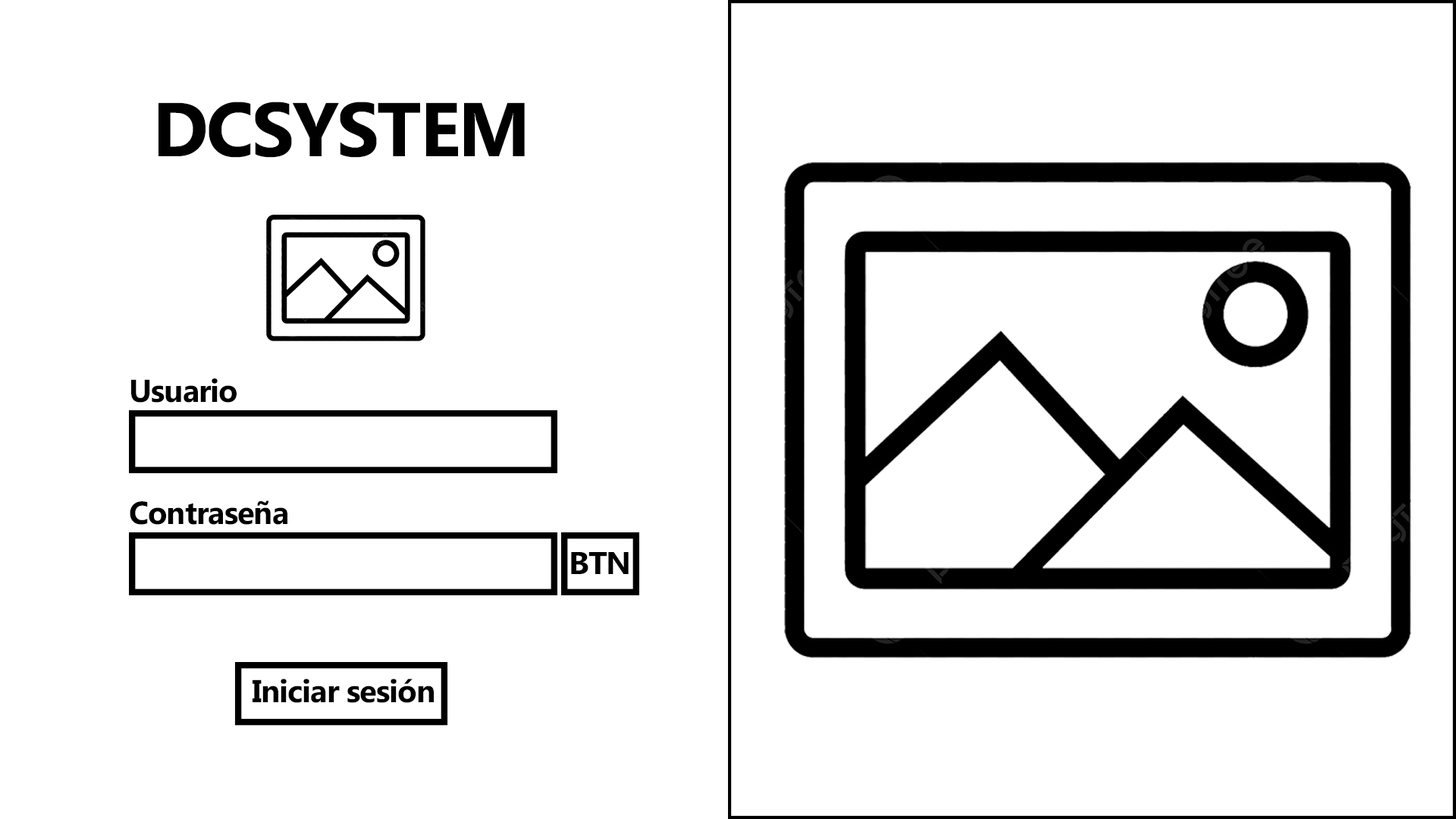
<style>
.page{position:relative;width:1456px;height:819px;background:#ffffff}
.page>*{position:absolute;margin:0}
.t1{font:76.1px "Ebrima-Bold";letter-spacing:-0.025em;color:#000000}
.t2{font:31.6px "Ebrima-Bold";letter-spacing:-0.025em;color:#000000}
.t3{font:31.8px "Ebrima-Bold";letter-spacing:-0.025em;color:#000000}
.t4{font:31.5px "Ebrima-Bold";letter-spacing:-0.025em;color:#000000}
</style>
<div class="page">
<p class="t1" style="left:158px;top:102px;width:367px;height:56px">DCSYSTEM</p>
<p class="t2" style="left:131px;top:378px;width:106px;height:25px">Usuario</p>
<p class="t3" style="left:130px;top:500px;width:157px;height:25px">Contraseña</p>
<p class="t4" style="left:571px;top:552px;width:58px;height:22px">BTN</p>
<p class="t2" style="left:253px;top:679px;width:181px;height:24px">Iniciar sesión</p>
</div>
